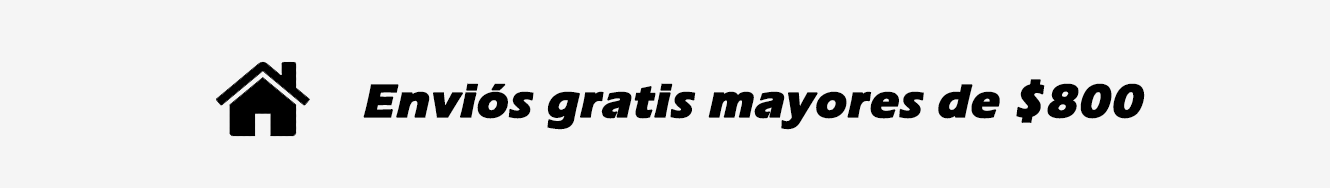
<style>
.page{position:relative;width:1330px;height:188px;background:#f5f5f5}
.page>*{position:absolute;margin:0}
.t1{font:48px "ErasITC-Bold";color:#000000;font-weight:bold;font-style:italic}
</style>
<div class="page">
<p class="t1" style="left:363px;top:79px;width:782px;height:51px">Enviós gratis mayores de $800</p>
</div>
